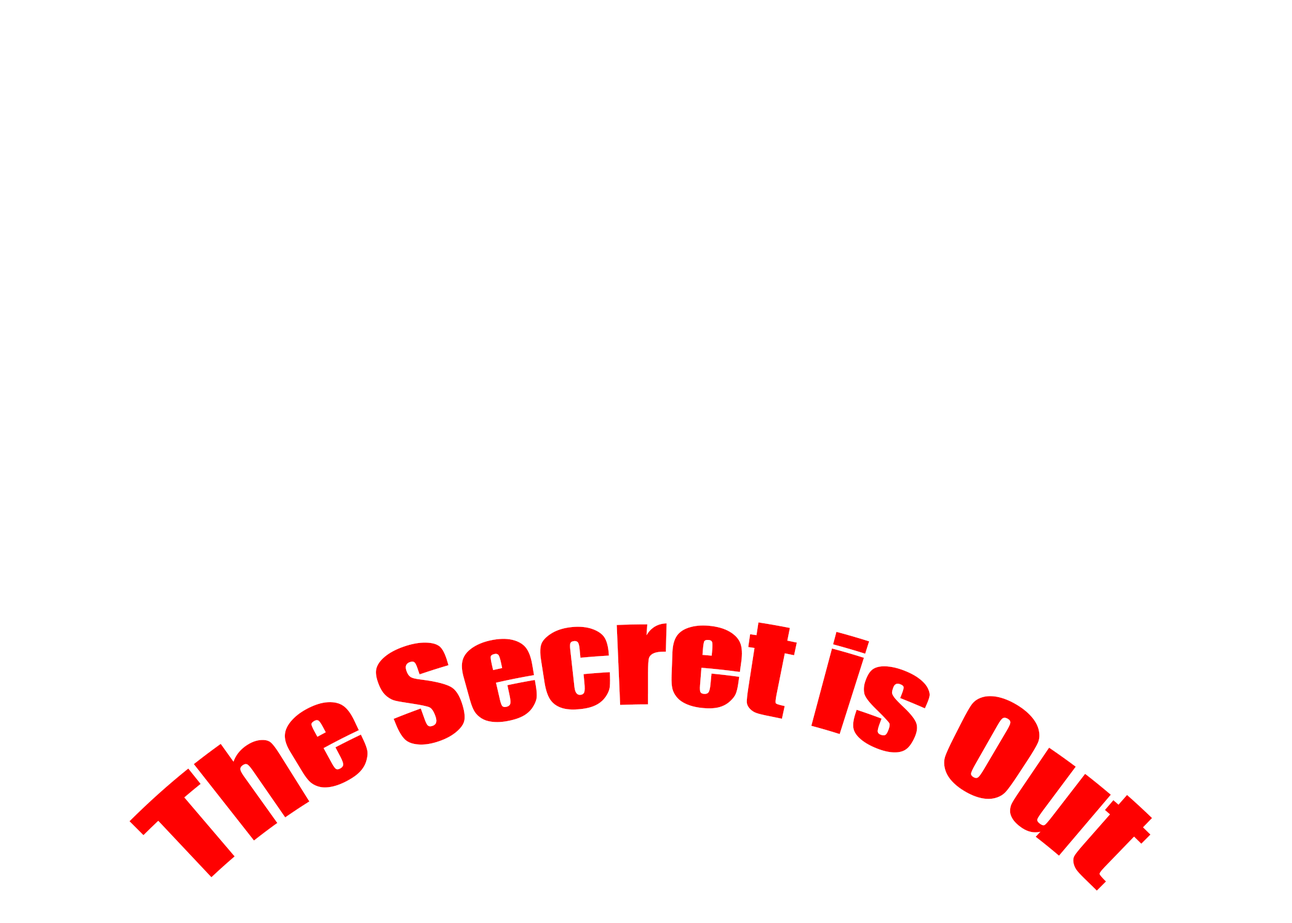
<style>
.page{position:relative;width:1292px;height:923px;background:#ffffff}
.page>*{position:absolute;margin:0}
.t1{font:123.1px/184.6px "Impact";color:#ff0101}
</style>
<div class="page">
<p class="t1" style="left:129px;top:622px;width:1023px;height:269px">The Secret is Out</p>
</div>
